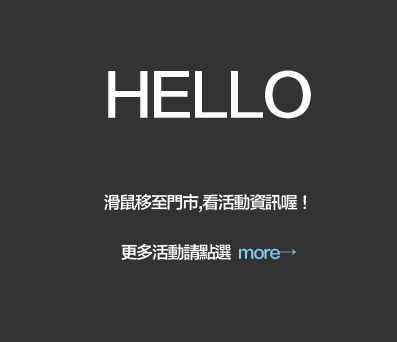
<style>
.page{position:relative;width:397px;height:342px;background:#333333}
.page>*{position:absolute;margin:0}
.t1{font:16.7px/49.9px "FZLTZHB--B51-0";letter-spacing:-0.06em;color:#ffffff}
.t2{font:58.3px/32.2px "FZLTZHB--B51-0";letter-spacing:-0.06em;color:#ffffff}
.t3{font:16.7px/49.9px "FZLTZHB--B51-0";letter-spacing:-0.06em;color:#7ecef4}
</style>
<div class="page">
<p class="t1" style="left:104px;top:70px;width:207px;height:191px;text-align:center"><span class="t2">HELLO<br><br><br><br></span>滑鼠移至門市,看活動資訊喔！<br>更多活動請點選  <span class="t3">more→</span></p>
</div>
